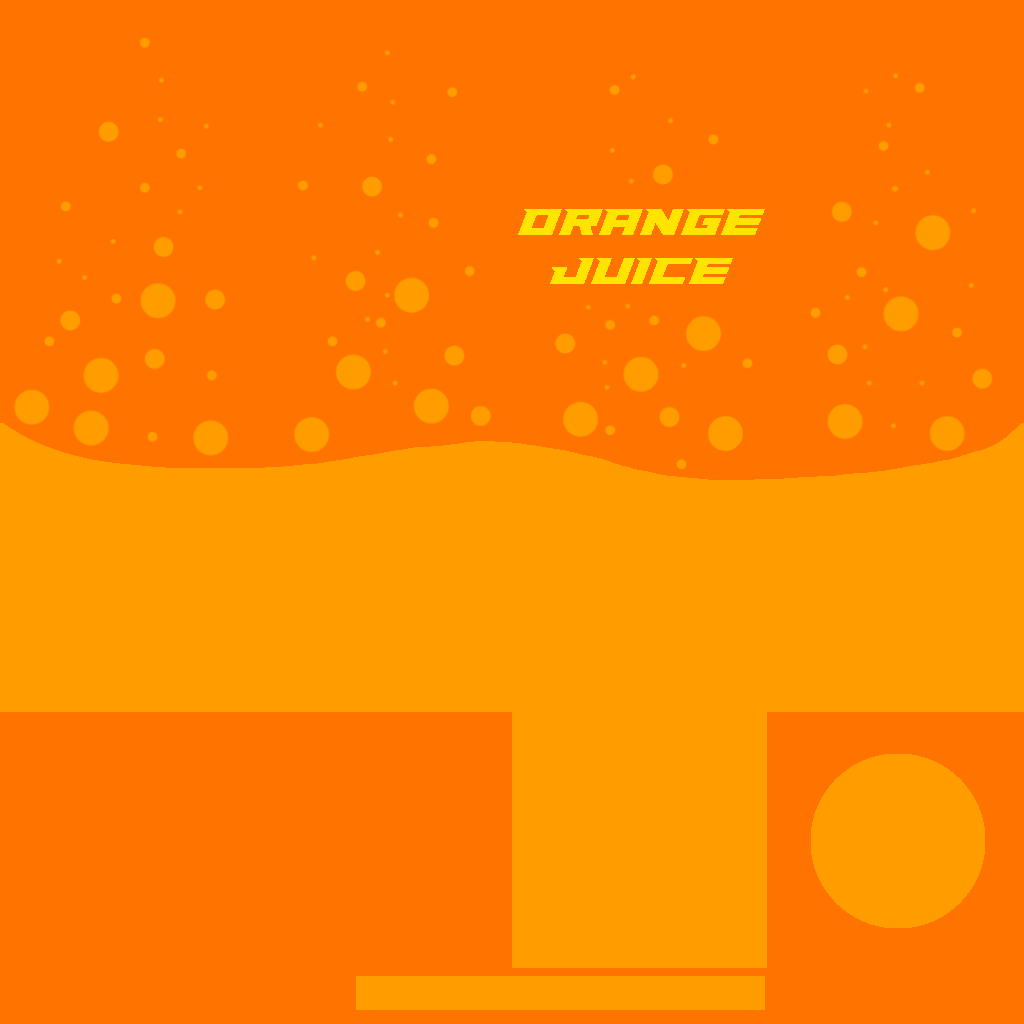
<style>
.page{position:relative;width:1024px;height:1024px;background:#ff7300}
.page>*{position:absolute;margin:0}
.t1{font:41px "Paladins";color:#ffe400}
.t2{font:66px "Paladins";color:#ffffff}
</style>
<div class="page">
<p class="t1" style="left:518px;top:209px;width:247px;height:75px;text-align:center"><span class="t2"><br></span>ORANGE<br>JUICE</p>
</div>
